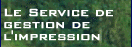
<style>
.page{position:relative;width:132px;height:47px}
.page>*{position:absolute;margin:0}
.t1{font:14px/12px "BankGothicBT-Medium";color:#ffffff;font-weight:bold}
</style>
<div class="page">
<p class="t1" style="left:4px;top:8px;width:109px;height:33px">Le Service de<br>gestion de<br>l'impression</p>
</div>
